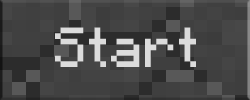
<style>
.page{position:relative;width:250px;height:100px}
.page>*{position:absolute;margin:0}
.t1{font:45px "Minecraftia";color:#dcdcdc}
</style>
<div class="page">
<p class="t1" style="left:55px;top:27px;width:141px;height:40px">Start</p>
</div>
